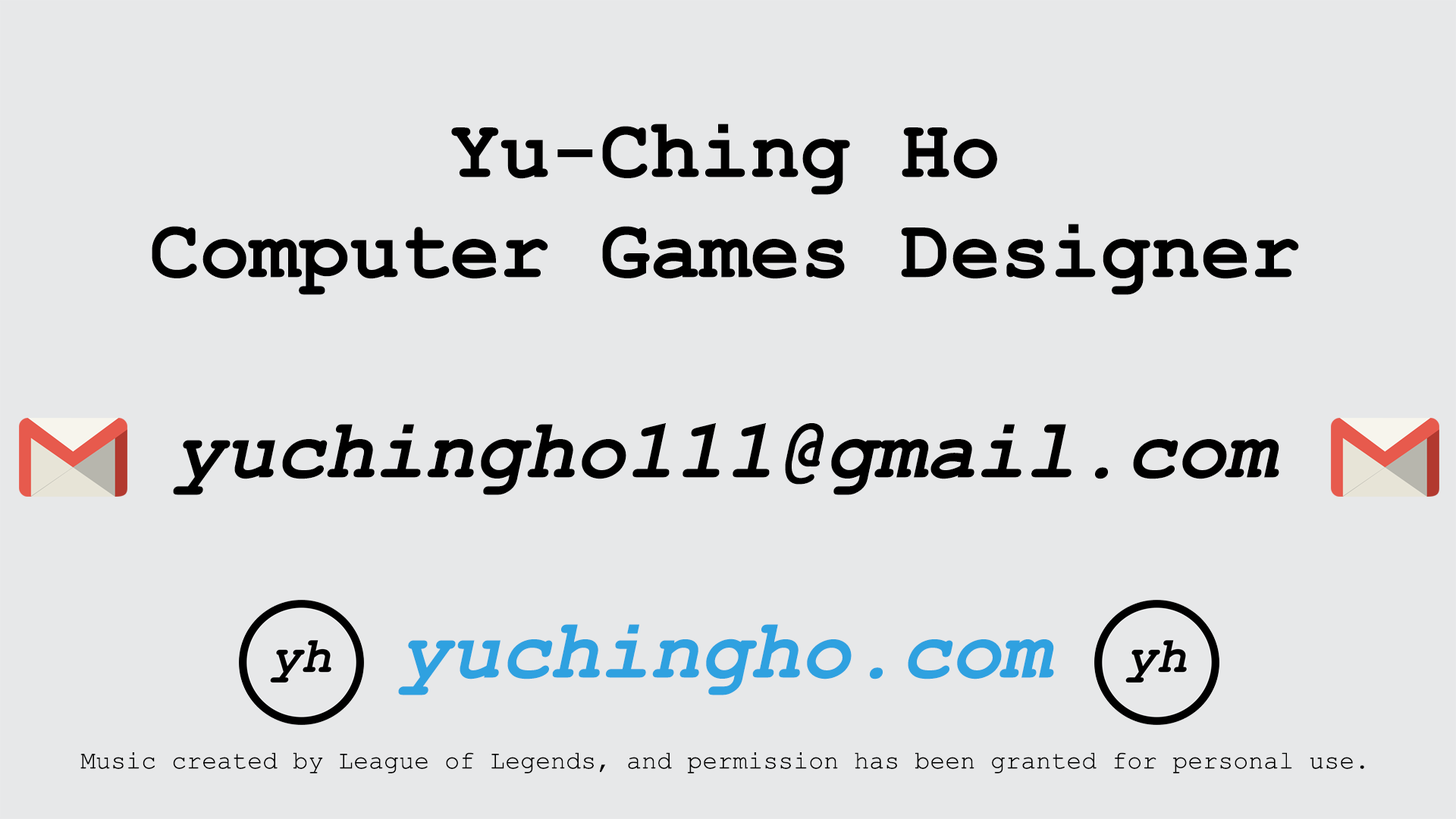
<style>
.page{position:relative;width:1456px;height:819px;background:#e7e8e9}
.page>*{position:absolute;margin:0}
.t1{font:25.3px "CourierNewPSMT";color:#000000}
.t2{font:83.4px "CourierNewPS-BoldMT";color:#000000}
.t3{font:83.4px "CourierNewPS-BoldItalicMT";color:#000000}
.t4{font:83.4px "CourierNewPS-BoldItalicMT";color:#2fa1e0}
</style>
<div class="page">
<p class="t1" style="left:80px;top:124px;width:1284px;height:649px;text-align:center"><span class="t2">Yu-Ching Ho<br>Computer Games Designer<br><br></span><span class="t3">yuchingho111@gmail.com<br><br></span><span class="t4">yuchingho.com<br></span><br><br>Music created by League of Legends, and permission has been granted for personal use.</p>
</div>
